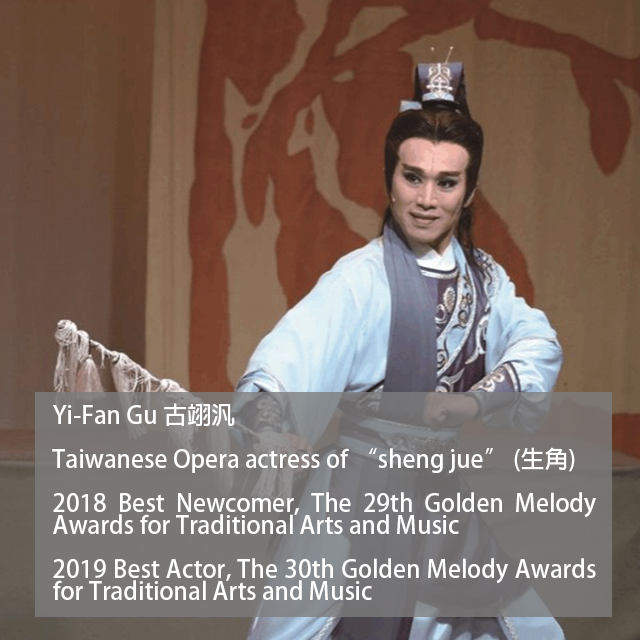
<style>
.page{position:relative;width:640px;height:640px}
.page>*{position:absolute;margin:0}
.t1{font:24px/22px "AdobeFanHeitiStd-Bold";color:#ffffff}
</style>
<div class="page">
<p class="t1" style="left:52px;top:403px;width:544px;height:197px;text-align:justify">Yi-Fan Gu 古翊汎<br><br>Taiwanese Opera actress of “sheng jue” (生角)<br><br>2018 Best Newcomer, The 29th Golden Melody Awards for Traditional Arts and Music<br><br>2019 Best Actor, The 30th Golden Melody Awards for Traditional Arts and Music</p>
</div>
